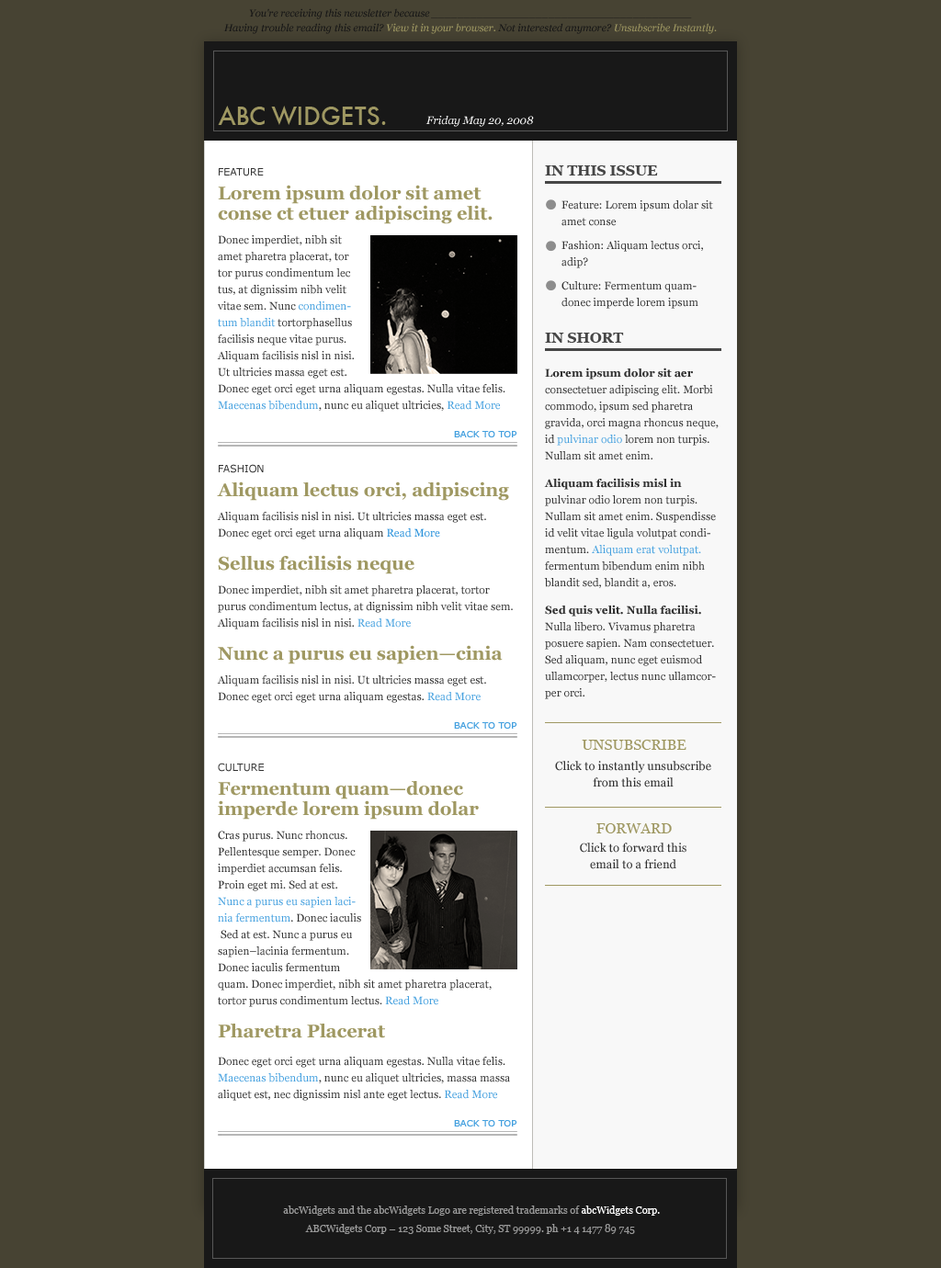
<style>
.page{position:relative;width:941px;height:1268px;background:#474333}
.page>*{position:absolute;margin:0}
.t1{font:23.5px "Futura-Medium";color:#9f9862}
.t2{font:23.5px "Futura-Medium";letter-spacing:-0.025em;color:#9f9862}
.t3{font:23.5px "Futura-Medium";letter-spacing:0.05em;color:#9f9862}
.t4{font:11px "Georgia-Italic";color:#ffffff}
.t5{font:14.7px "Georgia-Bold";letter-spacing:-0.01em;color:#464646;text-transform:uppercase}
.t6{font:11px/16.5px "Georgia";color:#313131}
.t7{font:11px/16.5px "Georgia-Bold";color:#313131}
.t8{font:11px/16.5px "Georgia";color:#44a0df}
.t9{font:9.2px "Verdana";color:#44a0df}
.t10{font:11px/16.5px "Georgia";color:#333333}
.t11{font:10.1px/16.5px "Verdana";color:#333333}
.t12{font:18.4px/20.2px "Georgia-Bold";color:#9f9862}
.t13{font:11px/16.5px "Georgia";color:#228eda}
.t14{font:18.4px/16.5px "Georgia-Bold";color:#9f9862}
.t15{font:14.7px "Georgia";color:#9f9862}
.t16{font:11.9px/16.5px "Georgia";color:#313131}
.t17{font:10.1px/14.7px "Georgia";color:#999999}
.t18{font:10.1px/14.7px "Georgia";color:#ffffff}
</style>
<div class="page">
<p class="t1" style="left:218px;top:106px;width:168px;height:19px">A<span class="t2">BC </span>WIDG<span class="t3">E</span>TS.</p>
<p class="t4" style="left:425px;top:116px;width:109px;height:11px">Friday May 20, 2008</p>
<p class="t5" style="left:545px;top:165px;width:113px;height:10px">In this issue</p>
<p class="t6" style="left:561px;top:200px;width:152px;height:109px">Feature: Lorem ipsum dolar sit<br>amet conse<br>Fashion: Aliquam lectus orci,<br>adip?<br>Culture: Fermentum quam—donec imperde lorem ipsum</p>
<p class="t5" style="left:545px;top:333px;width:79px;height:10px">IN SHORT</p>
<p class="t6" style="left:544px;top:367px;width:174px;height:332px"><span class="t7">Lorem ipsum dolor sit aer </span>consectetuer adipiscing elit. Morbi commodo, ipsum sed pharetra gravida, orci magna rhoncus neque, id <span class="t8">pulvinar odio </span>lorem non turpis. Nullam sit amet enim.<br><span class="t7">Aliquam facilisis misl in   </span>pulvinar odio lorem non turpis. Nullam sit amet enim. Suspendisse id velit vitae ligula volutpat condimentum. <span class="t8">Aliquam erat volutpat. </span>fermentum bibendum enim nibh blandit sed, blandit a, eros.<br><span class="t7">Sed quis velit. Nulla facilisi.</span> Nulla libero. Vivamus pharetra posuere sapien. Nam consectetuer. Sed aliquam, nunc eget euismod ullamcorper, lectus nunc ullamcorper orci.</p>
<p class="t9" style="left:454px;top:431px;width:63px;height:6px">BACK TO TOP</p>
<p class="t10" style="left:217px;top:464px;width:296px;height:239px"><span class="t11">FASHION<br></span><span class="t12">Aliquam lectus orci, adipiscing<br></span>Aliquam facilisis nisl in nisi. Ut ultricies massa eget est. Donec eget orci eget urna aliquam <span class="t13">Read More<br></span><span class="t12">Sellus facilisis neque<br></span>Donec imperdiet, nibh sit amet pharetra placerat, tortor purus condimentum lectus, at dignissim nibh velit vitae sem. Aliquam facilisis nisl in nisi. <span class="t8">Read More<br></span><span class="t14">Nunc a purus eu sapien</span><span class="t12">—</span><span class="t14">cinia <br></span>Aliquam facilisis nisl in nisi. Ut ultricies massa eget est. Donec eget orci eget urna aliquam egestas. <span class="t8">Read More</span></p>
<p class="t9" style="left:454px;top:722px;width:63px;height:6px">BACK TO TOP</p>
<p class="t15" style="left:581px;top:739px;width:105px;height:11px">UNSUBSCRIBE</p>
<p class="t16" style="left:555px;top:761px;width:156px;height:26px;text-align:center">Click to instantly unsubscribe from this email</p>
<p class="t15" style="left:596px;top:823px;width:75px;height:10px">FORWARD</p>
<p class="t16" style="left:580px;top:842px;width:106px;height:27px;text-align:center">Click to forward this email to a friend</p>
<p class="t9" style="left:454px;top:1120px;width:63px;height:6px">BACK TO TOP</p>
<p class="t17" style="left:283px;top:1205px;width:377px;height:29px;text-align:center">abcWidgets and the abcWidgets Logo are registered trademarks of <span class="t18">abcWidgets Corp. <br></span>ABCWidgets Corp – 123 Some Street, City, ST 99999. ph +1 4 1477 89 745</p>
</div>
